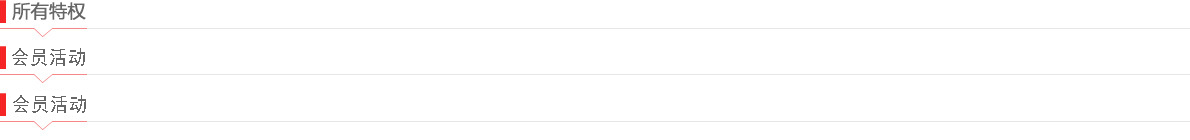
<style>
.page{position:relative;width:1190px;height:140px;background:#ffffff}
.page>*{position:absolute;margin:0}
.t1{font:19.5px "SimHei";letter-spacing:0.075em;color:#676767;scale:0.9 1}
</style>
<div class="page">
<p class="t1" style="left:12px;top:48px;width:73px;height:18px">会员活动</p>
<p class="t1" style="left:13px;top:95px;width:73px;height:18px">会员活动</p>
</div>
